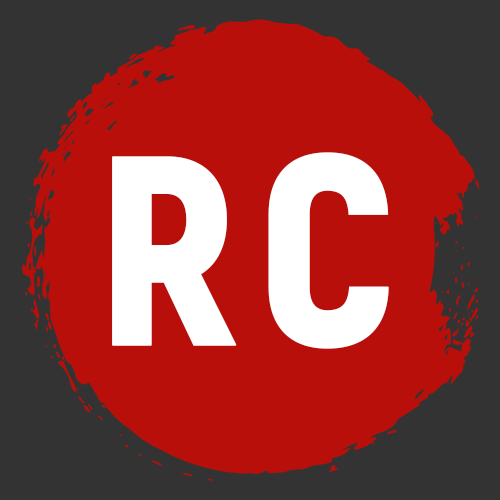
<style>
.page{position:relative;width:500px;height:500px;background:#b80f0a}
.page>*{position:absolute;margin:0}
.t1{font:268.8px "Akrobat-Black";letter-spacing:0.05em;color:#ffffff;text-transform:uppercase;font-weight:bold}
</style>
<div class="page">
<p class="t1" style="left:112px;top:152px;width:277px;height:197px">RC</p>
</div>
